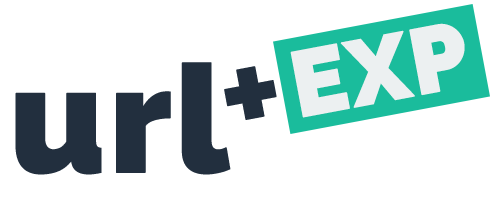
<style>
.page{position:relative;width:500px;height:200px;background:#ffffff}
.page>*{position:absolute;margin:0}
.t1{font:92.3px "Raleway-Black";color:#ecf0f1;font-weight:bold}
.t2{font:150px "Raleway-Black";color:#222f3e;font-weight:bold}
.t3{font:150px "Raleway-Bold";color:#222f3e;font-weight:bold}
</style>
<div class="page">
<p class="t1" style="left:290px;top:23px;width:175px;height:95px;rotate:-11deg">EXP</p>
<p class="t2" style="left:15px;top:62px;width:216px;height:113px">url</p>
<p class="t3" style="left:224px;top:66px;width:53px;height:54px;rotate:-11deg">+</p>
</div>
